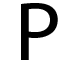
<style>
.page{position:relative;width:75px;height:75px;background:#ffffff}
.page>*{position:absolute;margin:0}
.t1{font:84.2px "MyriadPro-Regular";color:#000000;scale:1.05 1}
</style>
<div class="page">
<p class="t1" style="left:21px;top:3px;width:37px;height:57px">P</p>
</div>
